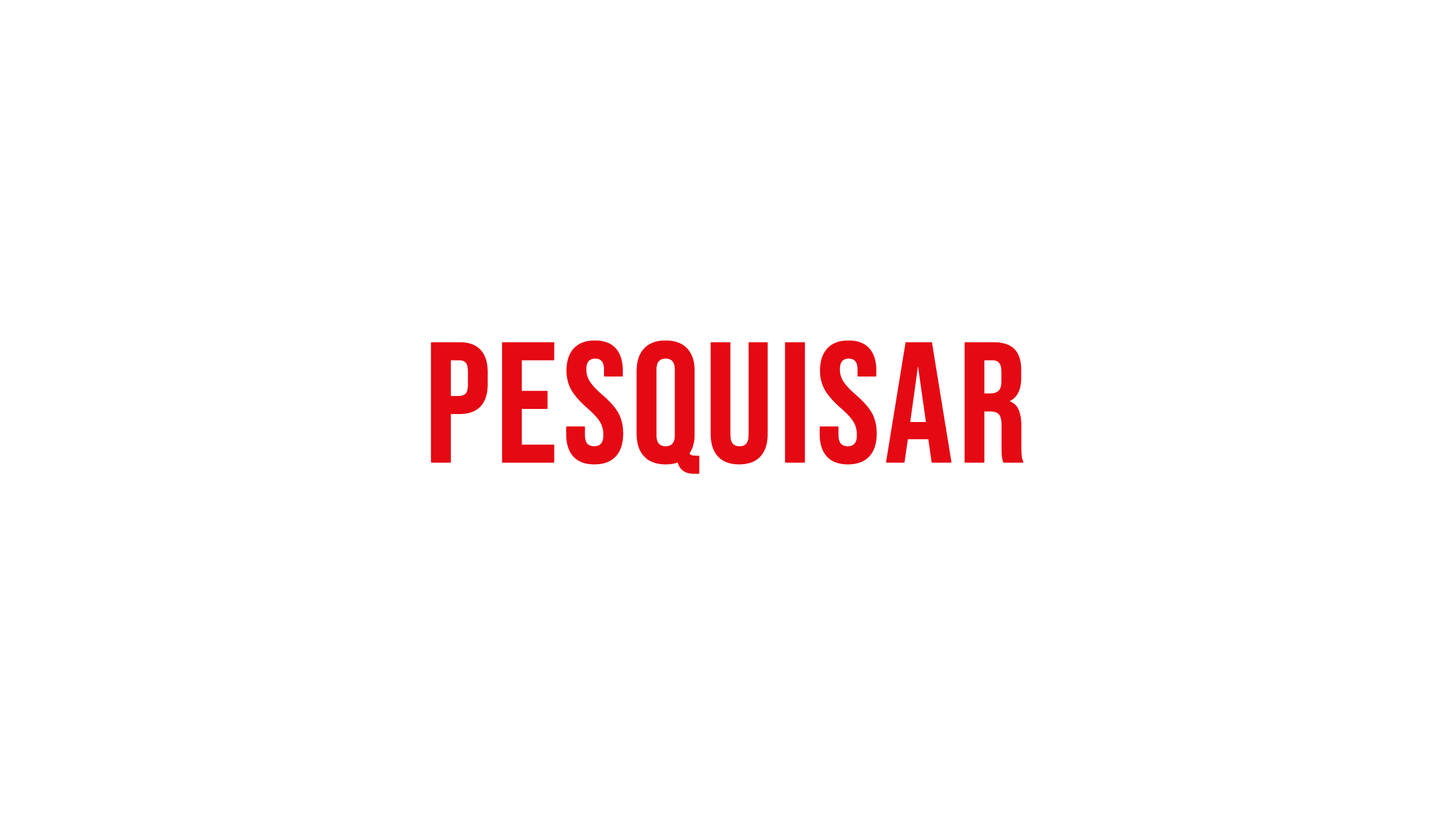
<style>
.page{position:relative;width:1456px;height:819px;background:#ffffff}
.page>*{position:absolute;margin:0}
.t1{font:170.6px "BebasNeue-Regular";letter-spacing:0.003em;color:#e50913;font-weight:bold}
</style>
<div class="page">
<p class="t1" style="left:431px;top:340px;width:593px;height:134px">PESQUISAR</p>
</div>
